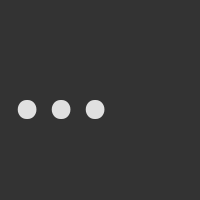
<style>
.page{position:relative;width:200px;height:200px;background:#333333}
.page>*{position:absolute;margin:0}
.t1{font:139px "Ubuntu";color:#e0e0e0}
</style>
<div class="page">
<p class="t1" style="left:17px;top:100px;width:88px;height:19px">...</p>
</div>
